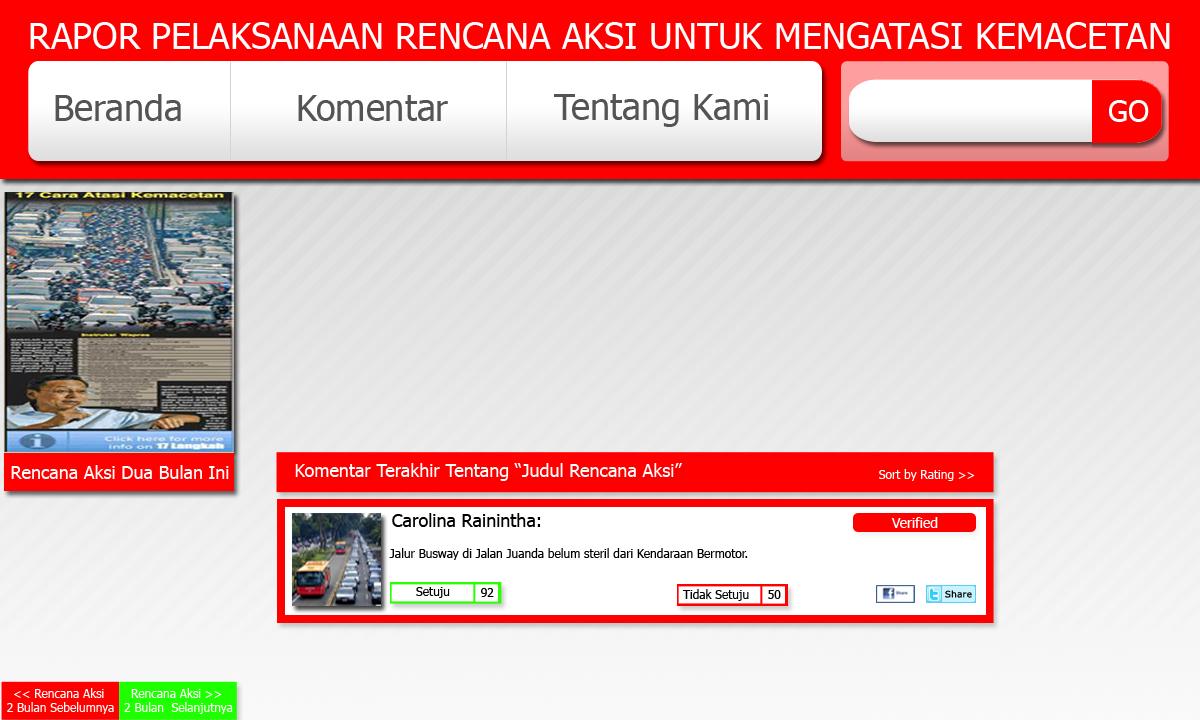
<style>
.page{position:relative;width:1200px;height:720px}
.page>*{position:absolute;margin:0}
.t1{font:36px "Tahoma";color:#ffffff}
.t2{font:36px "Tahoma";color:#565353}
.t3{font:30px "Tahoma";color:#ffffff}
.t4{font:18px "Tahoma";color:#fffefe}
.t5{font:12px "Tahoma";color:#ffffff}
.t6{font:18px "Tahoma";color:#000000}
.t7{font:14px "Tahoma";color:#fefefe}
.t8{font:12px "Tahoma";color:#000000}
.t9{font:12px "Tahoma";color:#020101}
.t10{font:12px "Tahoma";color:#fcfcfc}
</style>
<div class="page">
<p class="t1" style="left:30px;top:22px;width:1140px;height:27px">RAPOR PELAKSANAAN RENCANA AKSI UNTUK MENGATASI KEMACETAN</p>
<p class="t2" style="left:55px;top:94px;width:126px;height:27px">Beranda</p>
<p class="t2" style="left:298px;top:95px;width:150px;height:26px">Komentar</p>
<p class="t2" style="left:554px;top:94px;width:214px;height:33px">Tentang Kami</p>
<p class="t3" style="left:1109px;top:100px;width:40px;height:22px">GO</p>
<p class="t4" style="left:11px;top:465px;width:218px;height:14px">Rencana Aksi Dua Bulan Ini</p>
<p class="t4" style="left:295px;top:463px;width:387px;height:18px">Komentar Terakhir Tentang “Judul Rencana Aksi”</p>
<p class="t5" style="left:879px;top:469px;width:96px;height:12px">Sort by Rating &gt;&gt;</p>
<p class="t6" style="left:392px;top:513px;width:149px;height:14px">Carolina Rainintha:</p>
<p class="t7" style="left:891px;top:517px;width:47px;height:11px">Verified</p>
<p class="t8" style="left:389px;top:548px;width:359px;height:12px">Jalur Busway di Jalan Juanda belum steril dari Kendaraan Bermotor.</p>
<p class="t9" style="left:416px;top:587px;width:34px;height:11px">Setuju</p>
<p class="t8" style="left:481px;top:588px;width:13px;height:9px">92</p>
<p class="t9" style="left:682px;top:589px;width:67px;height:12px">Tidak Setuju</p>
<p class="t8" style="left:768px;top:590px;width:13px;height:9px">50</p>
<p class="t10" style="left:7px;top:688px;width:107px;height:26px;text-align:center">&lt;&lt; Rencana Aksi <br>2 Bulan Sebelumnya</p>
<p class="t10" style="left:124px;top:688px;width:109px;height:26px;text-align:center">Rencana Aksi &gt;&gt; <br>2 Bulan  Selanjutnya</p>
</div>
